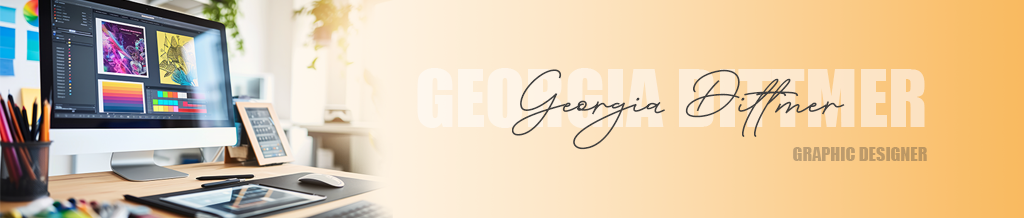
<style>
.page{position:relative;width:1024px;height:218px}
.page>*{position:absolute;margin:0}
.t1{font:73.2px "Impact";color:#fdedd7}
.t2{font:80px "AbsoluteBeautyScript-Bold";color:#404040}
.t3{font:18px "Impact";color:#bc9a6a}
</style>
<div class="page">
<p class="t1" style="left:417px;top:68px;width:508px;height:60px">GEORGIA DITTMER</p>
<p class="t2" style="left:512px;top:69px;width:333px;height:81px">Georgia Dittmer</p>
<p class="t3" style="left:793px;top:147px;width:134px;height:14px">GRAPHIC DESIGNER</p>
</div>
